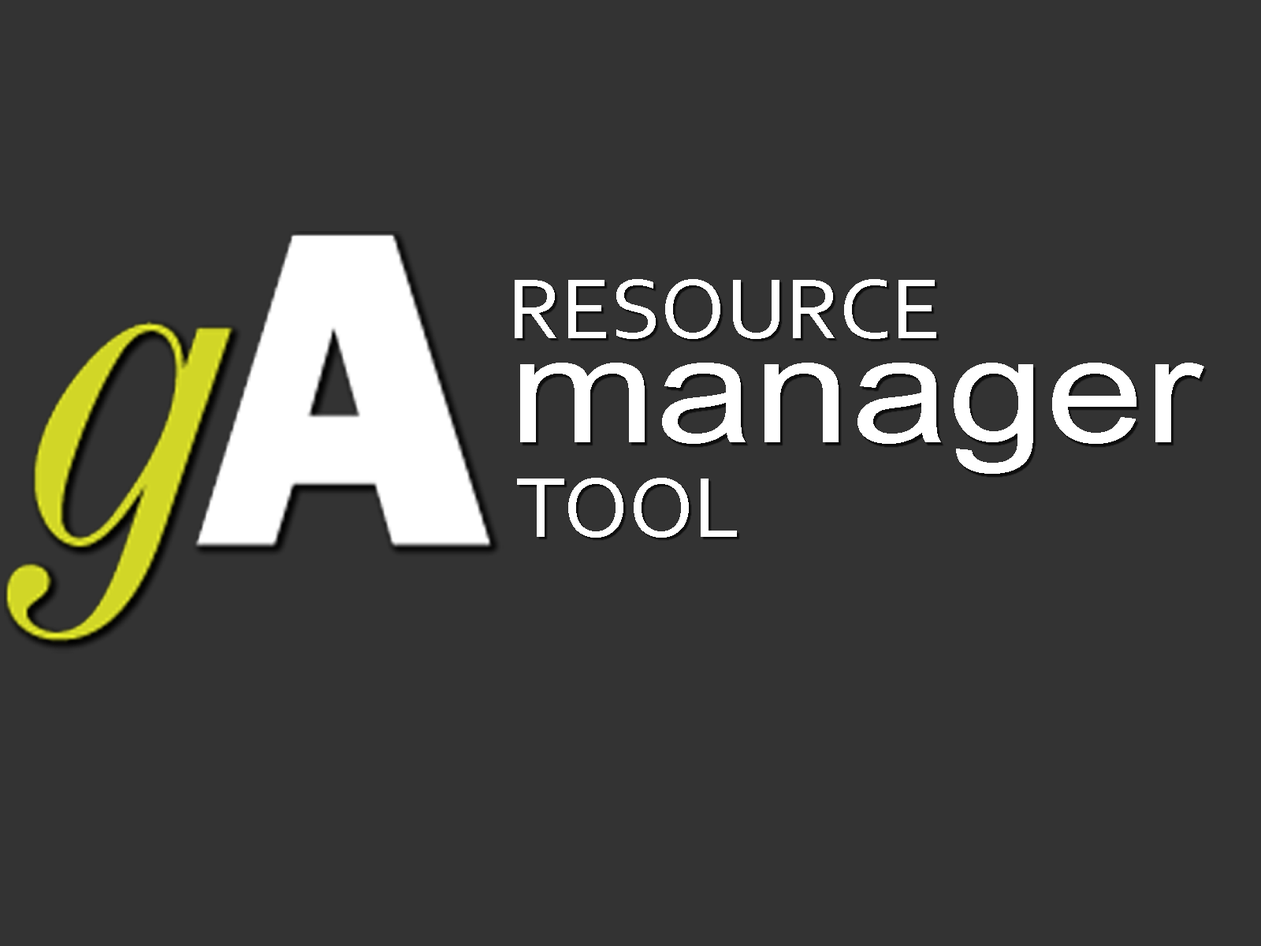
<style>
.page{position:relative;width:1261px;height:946px;background:#333333}
.page>*{position:absolute;margin:0}
.t1{font:89.7px "Corbel";color:#ffffff}
.t2{font:149.4px "ArialMT";color:#ffffff;scale:1.18 1}
</style>
<div class="page">
<p class="t1" style="left:515px;top:279px;width:421px;height:60px">RESOURCE</p>
<p class="t2" style="left:520px;top:363px;width:684px;height:111px">manager</p>
<p class="t1" style="left:517px;top:478px;width:220px;height:59px">TOOL</p>
</div>
